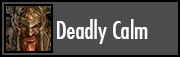
<style>
.page{position:relative;width:180px;height:57px;background:#4c4c4c}
.page>*{position:absolute;margin:0}
.t1{font:24px "FuturaCondensed";color:#ffffff}
</style>
<div class="page">
<p class="t1" style="left:57px;top:19px;width:91px;height:25px">Deadly Calm</p>
</div>
